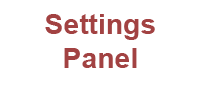
<style>
.page{position:relative;width:200px;height:93px;background:#ffffff}
.page>*{position:absolute;margin:0}
.t1{font:27.9px "Arial-BoldMT";color:#a24242}
</style>
<div class="page">
<p class="t1" style="left:45px;top:14px;width:110px;height:54px;text-align:center">Settings<br>Panel</p>
</div>
